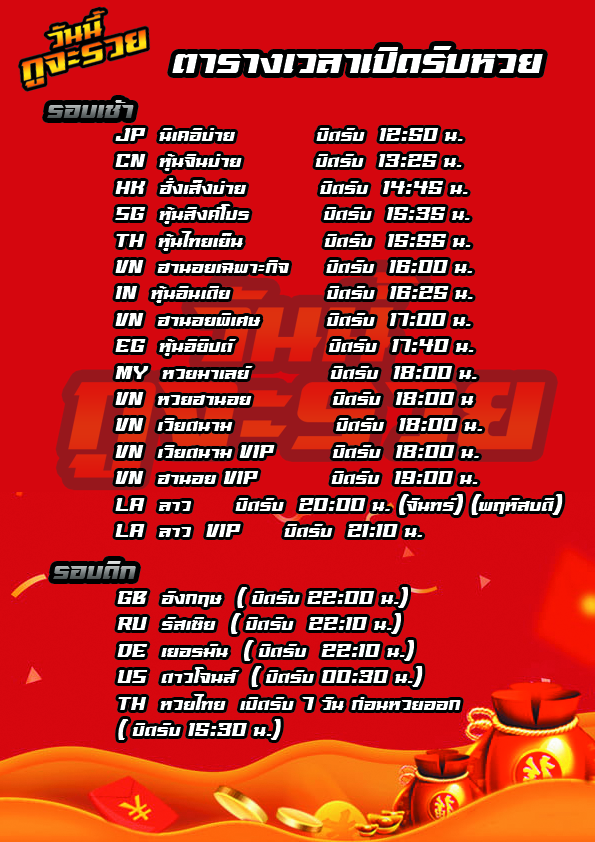
<style>
.page{position:relative;width:595px;height:842px;background:#d5060e}
.page>*{position:absolute;margin:0}
.t1{font:45px "sdrangverV.1-Regular";color:#ffffff}
.t2{font:30px "sdrangverV.1-Regular"}
.t3{font:22px "sdrangverV.1-Regular";color:#ffffff}
</style>
<div class="page">
<p class="t1" style="left:172px;top:46px;width:371px;height:27px">ตารางเวลาเปิดรับหวย</p>
<p class="t2" style="left:47px;top:100px;width:87px;height:18px">รอบเช้า</p>
<p class="t3" style="left:115px;top:128px;width:448px;height:409px">JP  นิเคอิบ่าย           ปิดรับ  12:50 น.<br>CN  หุ้นจีนบ่าย          ปิดรับ  13:25 น.<br>HK  ฮั่งเส็งบ่าย          ปิดรับ  14:45 น.<br>SG  หุ้นสิงค์โปร          ปิดรับ  15:35 น.<br>TH  หุ้นไทยเย็น           ปิดรับ  15:55 น.<br>VN  ฮานอยเฉพาะกิจ     ปิดรับ  16:00 น.<br>IN  หุ้นอินเดีย             ปิดรับ  16:25 น.<br>VN  ฮานอยพิเศษ         ปิดรับ  17:00 น.<br>EG  หุ้นอียิปต์             ปิดรับ  17:40 น.<br>MY  หวยมาเลย์           ปิดรับ  18:00 น.<br>VN  หวยฮานอย           ปิดรับ  18:00 น<br>VN  เวียดนาม              ปิดรับ  18:00 น.<br>VN  เวียดนาม VIP        ปิดรับ  18:00 น.<br>VN  ฮานอย VIP          ปิดรับ  19:00 น.<br>LA  ลาว      ปิดรับ  20:00 น. (จันทร์) (พฤหัสบดี)<br>LA  ลาว  VIP      ปิดรับ  21:10 น.</p>
<p class="t2" style="left:53px;top:561px;width:83px;height:18px">รอบดึก</p>
<p class="t3" style="left:117px;top:587px;width:344px;height:153px">GB  อังกฤษ  ( ปิดรับ 22:00 น.)<br>RU  รัสเซีย  ( ปิดรับ  22:10 น.)<br>DE  เยอรมัน  ( ปิดรับ  22:10 น.)<br>US  ดาวโจนส์  ( ปิดรับ 00:30 น.)<br>TH  หวยไทย  เปิดรับ 7 วัน ก่อนหวยออก<br>( ปิดรับ 15:30 น.)</p>
</div>
